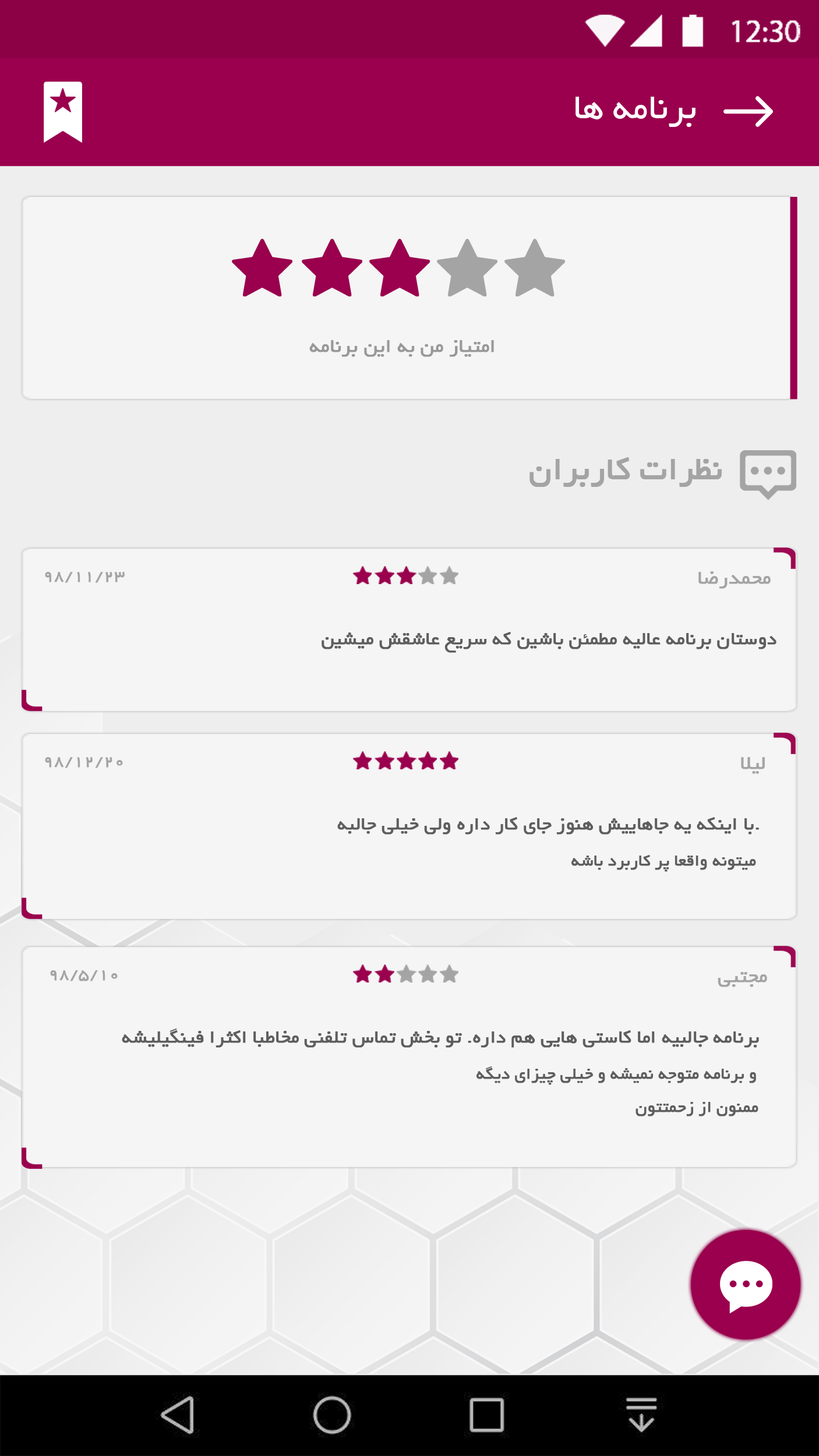
<style>
.page{position:relative;width:819px;height:1456px;background:#f5f5f5}
.page>*{position:absolute;margin:0}
.t1{font:38.7px "BYekan";color:#ffffff}
.t2{font:21px "BYekan";color:#989898;font-weight:bold}
.t3{font:34.9px "BYekan";color:#a4a4a4;font-weight:bold}
.t4{font:17.5px "BYekan";color:#a4a4a4;font-weight:bold}
.t5{font:21px "BYekan";color:#a4a4a4;font-weight:bold}
.t6{font:19.8px "BYekan";color:#5e5e5e;font-weight:bold}
.t7{font:17.5px "BYekan";color:#5e5e5e;font-weight:bold}
</style>
<div class="page">
<p class="t1" style="left:575px;top:97px;width:120px;height:30px">برنامه ها</p>
<p class="t2" style="left:309px;top:340px;width:185px;height:17px">امتیاز من به این برنامه</p>
<p class="t3" style="left:529px;top:457px;width:193px;height:30px">نظرات کاربران</p>
<p class="t4" style="left:45px;top:572px;width:80px;height:11px">98/11/23</p>
<p class="t5" style="left:698px;top:571px;width:73px;height:18px">محمدرضا</p>
<p class="t6" style="left:322px;top:632px;width:454px;height:21px">دوستان برنامه عالیه مطمئن باشین که سریع عاشقش میشین</p>
<p class="t4" style="left:45px;top:757px;width:78px;height:11px">98/12/20</p>
<p class="t5" style="left:741px;top:757px;width:24px;height:17px">لیلا</p>
<p class="t6" style="left:337px;top:817px;width:422px;height:18px">با اینکه یه جاهاییش هنوز جای کار داره ولی خیلی جالبه.</p>
<p class="t7" style="left:571px;top:855px;width:185px;height:17px">میتونه واقعا پر کاربرد باشه</p>
<p class="t4" style="left:50px;top:970px;width:68px;height:11px">98/5/10</p>
<p class="t5" style="left:718px;top:972px;width:49px;height:15px">مجتبی</p>
<p class="t6" style="left:122px;top:1029px;width:637px;height:19px">برنامه جالبیه اما کاستی هایی هم داره. تو بخش تماس تلفنی مخاطبا اکثرا فینگیلیشه</p>
<p class="t7" style="left:476px;top:1066px;width:280px;height:19px">و برنامه متوجه نمیشه و خیلی چیزای دیگه</p>
<p class="t7" style="left:635px;top:1102px;width:123px;height:15px">ممنون از زحمتتون</p>
</div>
